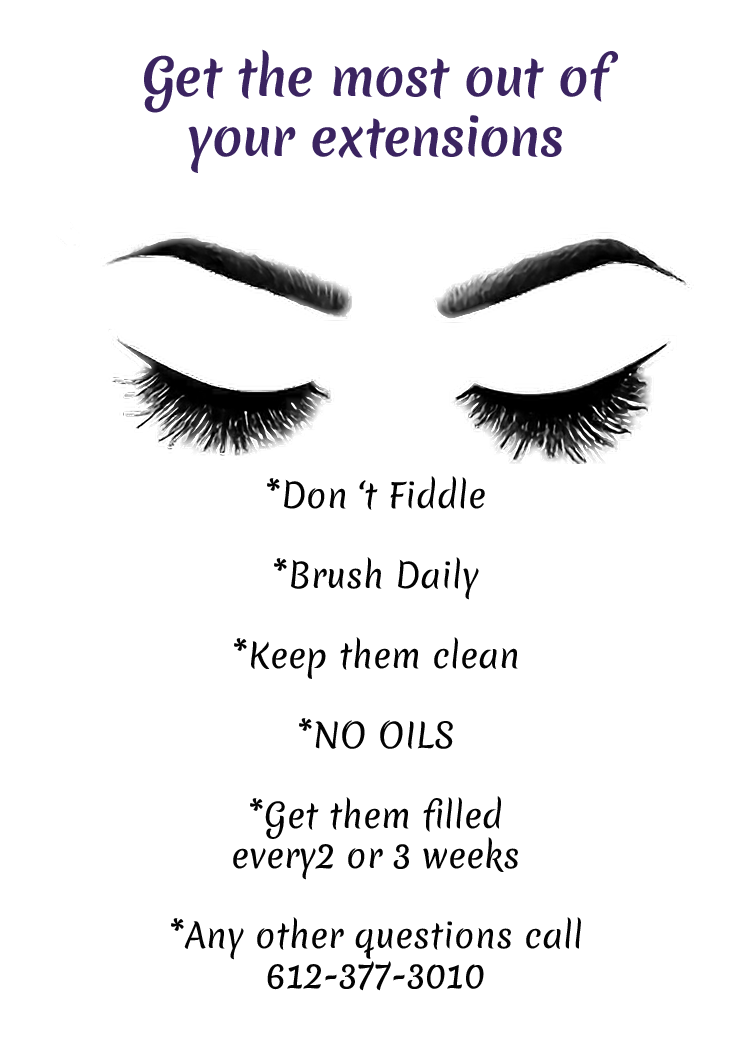
<style>
.page{position:relative;width:750px;height:1050px;background:#ffffff}
.page>*{position:absolute;margin:0}
.t1{font:50px "Merienda-Bold";color:#3b2461}
.t2{font:33.3px "Merienda-Regular_0_wt";color:#030303}
</style>
<div class="page">
<p class="t1" style="left:144px;top:49px;width:474px;height:124px;text-align:center">Get the most out of <br>your extensions</p>
<p class="t2" style="left:171px;top:476px;width:410px;height:515px;text-align:center">*Don ‘t Fiddle<br><br>*Brush Daily<br><br>*Keep them clean<br><br>*NO OILS<br><br>*Get them filled <br>every2 or 3 weeks<br><br>*Any other questions call<br>612-377-3010</p>
</div>
